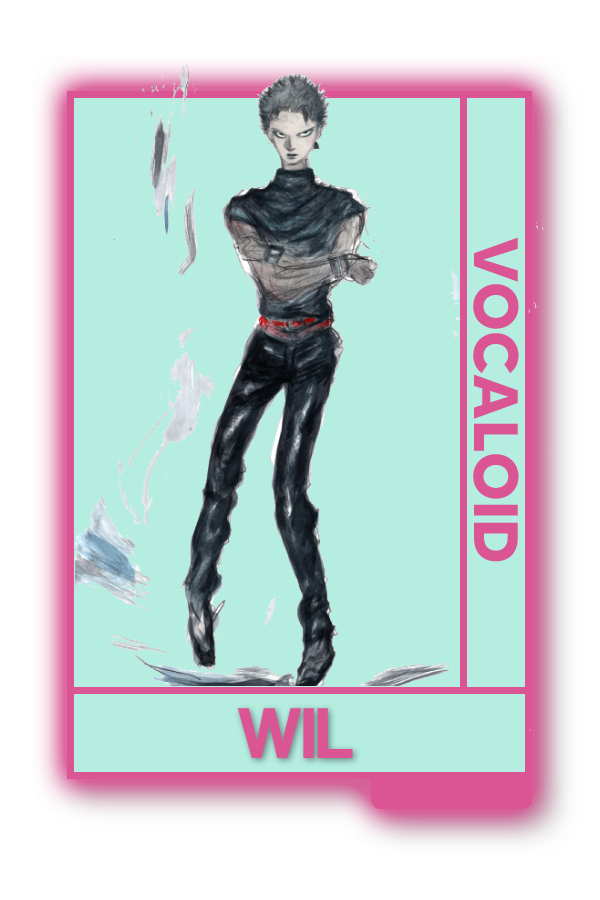
<style>
.page{position:relative;width:600px;height:900px;background:#b5ede1}
.page>*{position:absolute;margin:0}
.t1{font:62.5px "MADETOMMY-Bold";color:#db5493}
.t2{font:75px "CoolveticaRg-Regular";color:#db5493}
</style>
<div class="page">
<p class="t1" style="left:473px;top:237px;width:46px;height:325px;rotate:90deg">VOCALOID</p>
<p class="t2" style="left:237px;top:708px;width:116px;height:50px">WIL</p>
</div>
